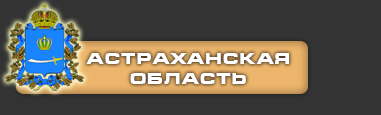
<style>
.page{position:relative;width:381px;height:115px;background:#333333}
.page>*{position:absolute;margin:0}
.t1{font:16.1px "Micra-Bold";color:#ffffff}
</style>
<div class="page">
<p class="t1" style="left:86px;top:53px;width:203px;height:31px;text-align:center">Астраханская<br>область</p>
</div>
